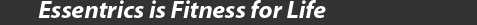
<style>
.page{position:relative;width:477px;height:25px;background:#333333}
.page>*{position:absolute;margin:0}
.t1{font:11.9px "MyriadPro-BoldIt";color:#ffffff}
</style>
<div class="page">
<p class="t1" style="left:38px;top:0px;width:288px;height:18px">Essentrics is Fitness for Life</p>
</div>
